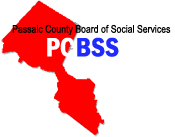
<style>
.page{position:relative;width:175px;height:137px;background:#ffffff}
.page>*{position:absolute;margin:0}
.t1{font:10.7px "ArialNarrow";color:#000000}
.t2{font:27.4px "FranklinGothic-DemiCond";color:#ffffff}
.t3{font:27.4px "FranklinGothic-DemiCond";color:#1f2aff}
</style>
<div class="page">
<p class="t1" style="left:12px;top:24px;width:159px;height:11px">Passaic County Board of Social Services</p>
<p class="t2" style="left:47px;top:37px;width:28px;height:20px">PC</p>
<p class="t3" style="left:77px;top:37px;width:42px;height:20px">BSS</p>
</div>
